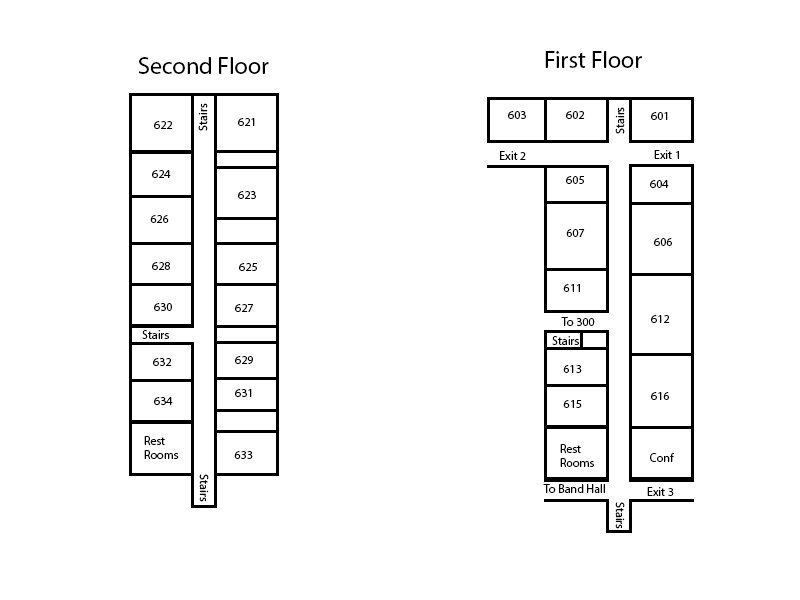
<style>
.page{position:relative;width:800px;height:600px;background:#ffffff}
.page>*{position:absolute;margin:0}
.t1{font:24px "MyriadPro-Regular";color:#000000}
.t2{font:12px "MyriadPro-Regular";color:#000000}
</style>
<div class="page">
<p class="t1" style="left:545px;top:51px;width:97px;height:17px">First Floor</p>
<p class="t1" style="left:138px;top:57px;width:131px;height:17px">Second Floor</p>
<p class="t2" style="left:198px;top:103px;width:10px;height:28px;rotate:-91deg">Stairs</p>
<p class="t2" style="left:508px;top:111px;width:18px;height:8px">603</p>
<p class="t2" style="left:566px;top:111px;width:19px;height:8px">602</p>
<p class="t2" style="left:615px;top:107px;width:10px;height:27px;rotate:-90deg">Stairs</p>
<p class="t2" style="left:651px;top:112px;width:17px;height:8px">601</p>
<p class="t2" style="left:154px;top:121px;width:19px;height:8px">622</p>
<p class="t2" style="left:238px;top:118px;width:17px;height:8px">621</p>
<p class="t2" style="left:654px;top:150px;width:25px;height:9px">Exit 1</p>
<p class="t2" style="left:500px;top:151px;width:26px;height:9px">Exit 2</p>
<p class="t2" style="left:152px;top:170px;width:19px;height:8px">624</p>
<p class="t2" style="left:566px;top:176px;width:18px;height:8px">605</p>
<p class="t2" style="left:650px;top:180px;width:19px;height:8px">604</p>
<p class="t2" style="left:238px;top:191px;width:18px;height:8px">623</p>
<p class="t2" style="left:150px;top:215px;width:19px;height:8px">626</p>
<p class="t2" style="left:566px;top:229px;width:19px;height:8px">607</p>
<p class="t2" style="left:654px;top:238px;width:18px;height:8px">606</p>
<p class="t2" style="left:152px;top:262px;width:18px;height:8px">628</p>
<p class="t2" style="left:239px;top:263px;width:18px;height:8px">625</p>
<p class="t2" style="left:563px;top:284px;width:17px;height:8px">611</p>
<p class="t2" style="left:154px;top:303px;width:18px;height:8px">630</p>
<p class="t2" style="left:235px;top:304px;width:18px;height:8px">627</p>
<p class="t2" style="left:561px;top:317px;width:34px;height:9px">To 300</p>
<p class="t2" style="left:651px;top:315px;width:19px;height:8px">612</p>
<p class="t2" style="left:142px;top:330px;width:27px;height:9px">Stairs</p>
<p class="t2" style="left:552px;top:336px;width:27px;height:9px">Stairs</p>
<p class="t2" style="left:153px;top:358px;width:19px;height:8px">632</p>
<p class="t2" style="left:235px;top:356px;width:18px;height:8px">629</p>
<p class="t2" style="left:563px;top:365px;width:19px;height:8px">613</p>
<p class="t2" style="left:235px;top:389px;width:17px;height:8px">631</p>
<p class="t2" style="left:154px;top:397px;width:19px;height:8px">634</p>
<p class="t2" style="left:563px;top:400px;width:19px;height:8px">615</p>
<p class="t2" style="left:651px;top:392px;width:18px;height:8px">616</p>
<p class="t2" style="left:144px;top:436px;width:35px;height:23px">Rest Rooms</p>
<p class="t2" style="left:560px;top:444px;width:34px;height:23px">Rest<br>Rooms</p>
<p class="t2" style="left:234px;top:451px;width:19px;height:8px">633</p>
<p class="t2" style="left:650px;top:453px;width:25px;height:9px">Conf</p>
<p class="t2" style="left:199px;top:474px;width:10px;height:28px;rotate:90deg">Stairs</p>
<p class="t2" style="left:543px;top:484px;width:62px;height:9px">To Band Hall</p>
<p class="t2" style="left:647px;top:487px;width:27px;height:9px">Exit 3</p>
<p class="t2" style="left:615px;top:502px;width:10px;height:27px;rotate:90deg">Stairs</p>
</div>
